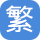
<style>
.page{position:relative;width:40px;height:40px;background:#4989db}
.page>*{position:absolute;margin:0}
.t1{font:30px "MicrosoftJhengHeiRegular";color:#ffffff;font-weight:bold}
</style>
<div class="page">
<p class="t1" style="left:6px;top:5px;width:27px;height:28px">繁</p>
</div>
